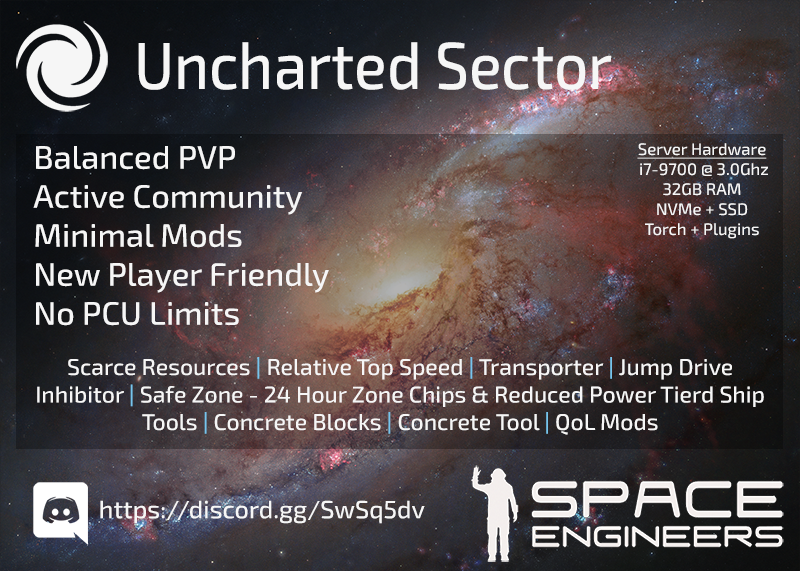
<style>
.page{position:relative;width:800px;height:571px}
.page>*{position:absolute;margin:0}
.t1{font:66.6px "Exo2-Medium";color:#f6f6f6;scale:0.9 1}
.t2{font:32.5px "Exo2-Medium";color:#f6f6f6}
.t3{font:16.7px "Exo2-Medium";color:#f6f6f6}
.t4{font:16.7px "Exo2-Medium";color:#f6f6f6;text-decoration:underline}
.t5{font:22.9px "Exo2-Medium";color:#f6f6f6}
.t6{font:22.9px "Exo2-Medium";color:#76c4ec}
.t7{font:25px "Exo2-Medium";color:#f6f6f6}
</style>
<div class="page">
<p class="t1" style="left:138px;top:42px;width:474px;height:48px">Uncharted Sector</p>
<p class="t2" style="left:33px;top:146px;width:296px;height:180px">Balanced PVP<br>Active Community<br>Minimal Mods<br>New Player Friendly<br>No PCU Limits</p>
<p class="t3" style="left:637px;top:143px;width:131px;height:96px;text-align:center"><span class="t4">Server Hardware<br></span> i7-9700 @ 3.0Ghz<br>32GB RAM<br>NVMe + SSD<br>Torch + Plugins</p>
<p class="t5" style="left:37px;top:357px;width:727px;height:78px;text-align:center">Scarce Resources <span class="t6">|</span> Relative Top Speed <span class="t6">| </span>Transporter <span class="t6">|</span> Jump Drive Inhibitor <span class="t6">|</span> Safe Zone - 24 Hour Zone Chips &amp; Reduced Power Tierd Ship Tools <span class="t6">|</span> Concrete Blocks <span class="t6">|</span> Concrete Tool <span class="t6">| </span>QoL Mods</p>
<p class="t7" style="left:100px;top:500px;width:325px;height:24px">https://discord.gg/SwSq5dv</p>
</div>
